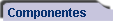
<style>
.page{position:relative;width:113px;height:21px;background:#c7c5dd}
.page>*{position:absolute;margin:0}
.t1{font:12px "Arial-BoldMT";color:#093272}
</style>
<div class="page">
<p class="t1" style="left:8px;top:8px;width:78px;height:11px">Componentes</p>
</div>
